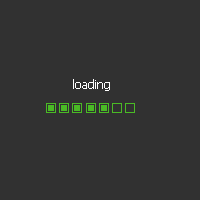
<style>
.page{position:relative;width:200px;height:200px;background:#313131}
.page>*{position:absolute;margin:0}
.t1{font:12px "Tahoma";color:#ffffff}
</style>
<div class="page">
<p class="t1" style="left:73px;top:79px;width:37px;height:12px">loading</p>
</div>
